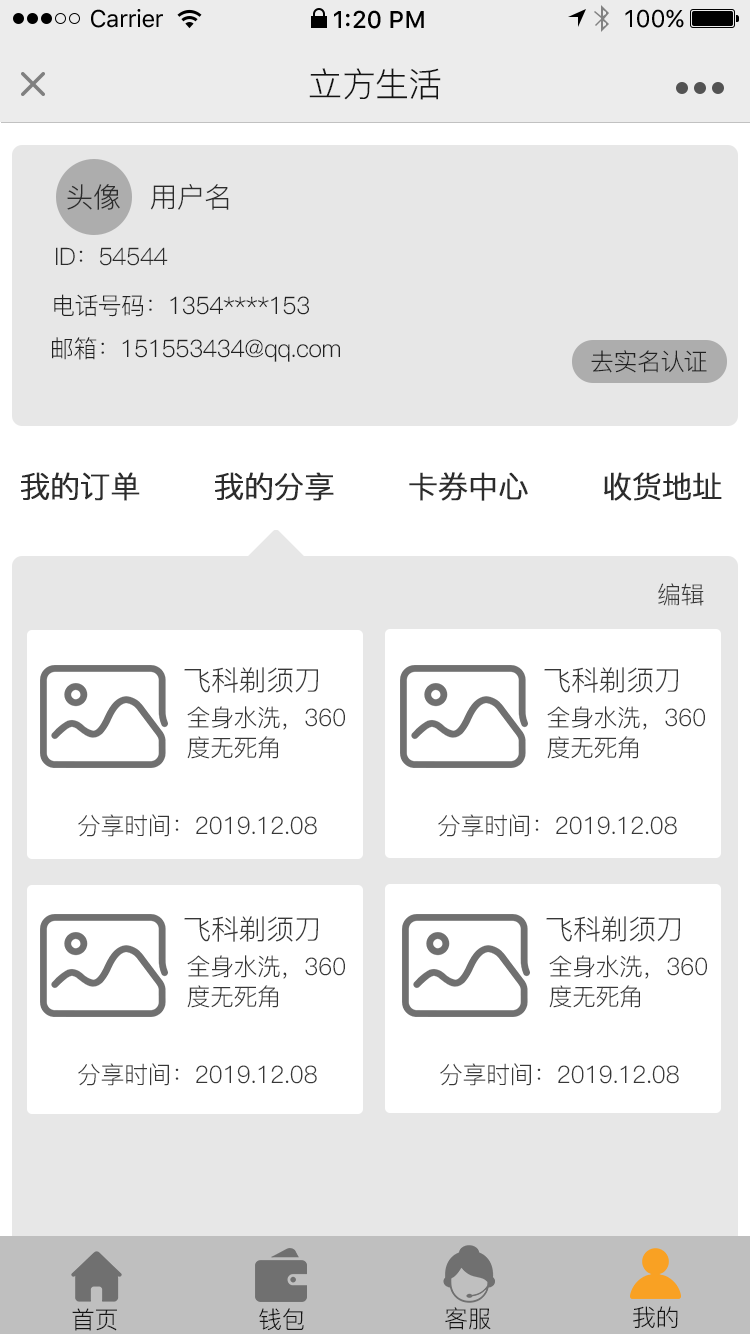
<style>
.page{position:relative;width:750px;height:1334px;background:#ffffff}
.page>*{position:absolute;margin:0}
.t1{font:24px "SFUIText-Regular";letter-spacing:-0.025em;color:#000000}
.t2{font:24px "SFUIText-Medium";color:#000000}
.t3{font:24px "SFUIText-Regular";color:#000000}
.t4{font:34px "PingFang-SC-Regular";letter-spacing:-0.02em;color:#141414}
.t5{font:28px "PingFang-SC-Regular";letter-spacing:-0.024em;color:#2c2c2c}
.t6{font:24px "PingFang-SC-Regular";letter-spacing:-0.024em;color:#2c2c2c}
.t7{font:24px "PingFang-SC-Regular";letter-spacing:-0.024em;color:#212121}
.t8{font:30px "PingFang-SC-Regular";letter-spacing:-0.024em;color:#2c2c2c;font-weight:bold}
.t9{font:24px "PingFang-SC-Regular";letter-spacing:-0.02em;color:#373737}
.t10{font:28px "PingFang-SC-Regular";letter-spacing:-0.02em;color:#373737}
.t11{font:24px/30px "PingFang-SC-Regular";letter-spacing:-0.02em;color:#373737}
.t12{font:24px "PingFang-SC-Regular";letter-spacing:-0.02em;color:#141414}
</style>
<div class="page">
<p class="t1" style="left:91px;top:9px;width:72px;height:19px">Carrier</p>
<p class="t2" style="left:334px;top:10px;width:90px;height:19px">1:20 PM</p>
<p class="t3" style="left:625px;top:9px;width:59px;height:19px">100%</p>
<p class="t4" style="left:309px;top:68px;width:132px;height:32px">立方生活</p>
<p class="t5" style="left:67px;top:184px;width:53px;height:26px">头像</p>
<p class="t5" style="left:150px;top:184px;width:79px;height:26px">用户名</p>
<p class="t6" style="left:56px;top:247px;width:112px;height:19px">ID：54544</p>
<p class="t7" style="left:54px;top:294px;width:255px;height:23px">电话号码：1354****153</p>
<p class="t7" style="left:52px;top:337px;width:288px;height:25px">邮箱：151553434@qq.com</p>
<p class="t7" style="left:591px;top:350px;width:116px;height:23px">去实名认证</p>
<p class="t8" style="left:21px;top:472px;width:119px;height:29px">我的订单</p>
<p class="t8" style="left:215px;top:472px;width:119px;height:29px">我的分享</p>
<p class="t8" style="left:409px;top:472px;width:119px;height:29px">卡券中心</p>
<p class="t8" style="left:604px;top:472px;width:118px;height:29px">收货地址</p>
<p class="t9" style="left:658px;top:583px;width:46px;height:23px">编辑</p>
<p class="t10" style="left:184px;top:667px;width:134px;height:26px">飞科剃须刀</p>
<p class="t10" style="left:544px;top:667px;width:134px;height:26px">飞科剃须刀</p>
<p class="t11" style="left:187px;top:706px;width:158px;height:53px">全身水洗，360<br>度无死角</p>
<p class="t11" style="left:547px;top:706px;width:158px;height:53px">全身水洗，360<br>度无死角</p>
<p class="t9" style="left:78px;top:814px;width:239px;height:23px">分享时间：2019.12.08</p>
<p class="t9" style="left:438px;top:814px;width:239px;height:23px">分享时间：2019.12.08</p>
<p class="t10" style="left:184px;top:916px;width:134px;height:26px">飞科剃须刀</p>
<p class="t10" style="left:546px;top:916px;width:134px;height:26px">飞科剃须刀</p>
<p class="t11" style="left:187px;top:955px;width:158px;height:53px">全身水洗，360<br>度无死角</p>
<p class="t11" style="left:549px;top:955px;width:158px;height:53px">全身水洗，360<br>度无死角</p>
<p class="t9" style="left:78px;top:1063px;width:239px;height:23px">分享时间：2019.12.08</p>
<p class="t9" style="left:440px;top:1063px;width:239px;height:23px">分享时间：2019.12.08</p>
<p class="t12" style="left:72px;top:1308px;width:45px;height:23px">首页</p>
<p class="t12" style="left:259px;top:1308px;width:45px;height:23px">钱包</p>
<p class="t12" style="left:445px;top:1307px;width:46px;height:23px">客服</p>
<p class="t12" style="left:633px;top:1306px;width:45px;height:22px">我的</p>
</div>
